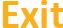
<style>
.page{position:relative;width:63px;height:28px;background:#ffffff}
.page>*{position:absolute;margin:0}
.t1{font:41.7px "Calibri-Bold";color:#fab01b}
</style>
<div class="page">
<p class="t1" style="left:2px;top:0px;width:62px;height:28px">Exit</p>
</div>
